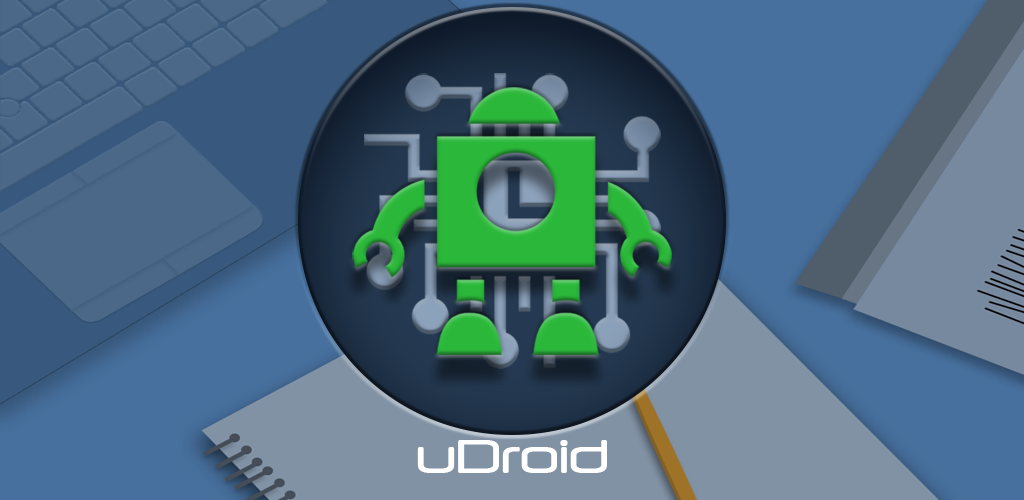
<style>
.page{position:relative;width:1024px;height:500px;background:#47709e}
.page>*{position:absolute;margin:0}
.t1{font:45px "Neuropol-Regular";color:#ffffff}
</style>
<div class="page">
<p class="t1" style="left:417px;top:440px;width:190px;height:33px">uDroid</p>
</div>
